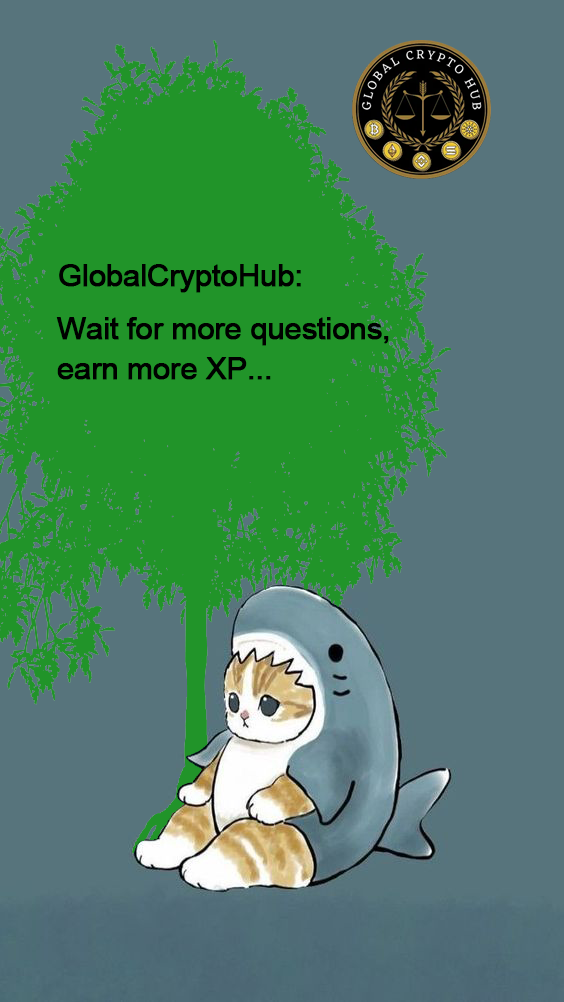
<style>
.page{position:relative;width:564px;height:1002px;background:#57747c}
.page>*{position:absolute;margin:0}
.t1{font:31px "ArialMT";letter-spacing:-0.03em;color:#000000;font-weight:bold}
.t2{font:31px/40px "ArialMT";letter-spacing:-0.03em;color:#000000;font-weight:bold}
</style>
<div class="page">
<p class="t1" style="left:59px;top:264px;width:242px;height:29px">GlobalCryptoHub:</p>
<p class="t2" style="left:56px;top:317px;width:333px;height:63px">Wait for more questions, <br>earn more XP...</p>
</div>
